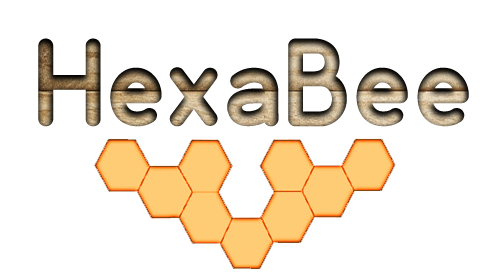
<style>
.page{position:relative;width:497px;height:280px;background:#ffffff}
.page>*{position:absolute;margin:0}
.t1{font:125px "Odin-Bold"}
</style>
<div class="page">
<p class="t1" style="left:38px;top:38px;width:431px;height:89px">HexaBee</p>
</div>
